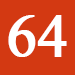
<style>
.page{position:relative;width:75px;height:75px;background:#d33912}
.page>*{position:absolute;margin:0}
.t1{font:60px "TimesNewRomanPSMT";color:#ffffff;font-weight:bold}
</style>
<div class="page">
<p class="t1" style="left:8px;top:15px;width:59px;height:42px">64</p>
</div>
